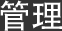
<style>
.page{position:relative;width:62px;height:31px;background:#333333}
.page>*{position:absolute;margin:0}
.t1{font:32.8px "AdobeHeitiStd-Regular";color:#ffffff}
</style>
<div class="page">
<p class="t1" style="left:0px;top:0px;width:62px;height:31px">管理</p>
</div>
